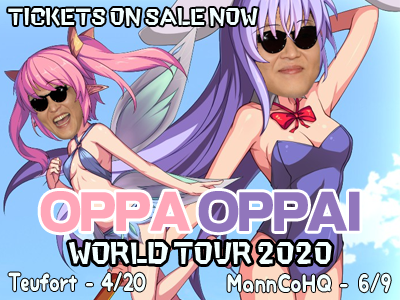
<style>
.page{position:relative;width:400px;height:300px}
.page>*{position:absolute;margin:0}
.t1{font:18.7px "NIS-SAI8-83pv-RKSJ-H";letter-spacing:-0.05em;color:#f2ffff}
.t2{font:48px "PSP-NOW-GU-90pv-RKSJ-H";letter-spacing:-0.05em;color:#9176bc}
.t3{font:48px "PSP-NOW-GU-90pv-RKSJ-H";letter-spacing:-0.05em;color:#ffa7b9}
.t4{font:24px "NIS-SAI8-83pv-RKSJ-H";letter-spacing:-0.05em;color:#f2ffff}
.t5{font:24px "mini-wakuwaku";letter-spacing:-0.05em;color:#f2ffff;scale:0.76 1}
.t6{font:24px "mini-wakuwaku";letter-spacing:-0.05em;color:#f2ffff;scale:0.82 1}
</style>
<div class="page">
<p class="t1" style="left:8px;top:8px;width:250px;height:18px">TICKETS ON SALE NOW</p>
<p class="t2" style="left:40px;top:191px;width:320px;height:42px"><span class="t3">OPPA </span>OPPAI</p>
<p class="t4" style="left:68px;top:241px;width:264px;height:23px">World Tour 2020</p>
<p class="t5" style="left:8px;top:272px;width:138px;height:20px">Teufort - 4/20</p>
<p class="t6" style="left:227px;top:273px;width:164px;height:20px">MannCoHQ - 6/9</p>
</div>
